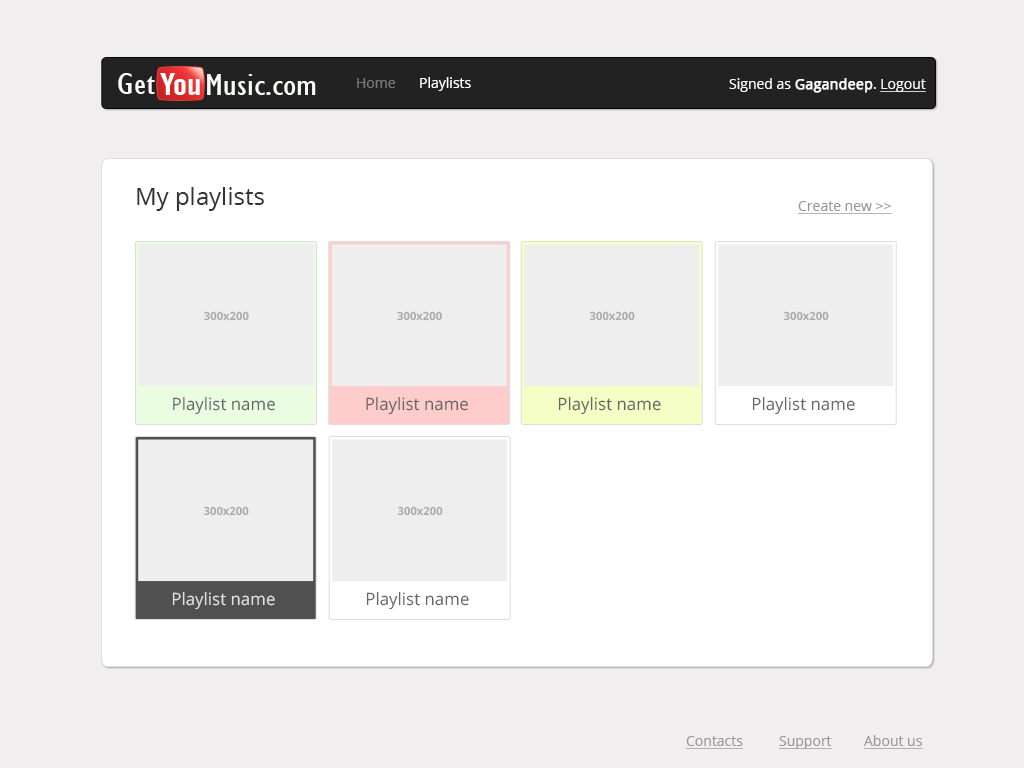
<style>
.page{position:relative;width:1024px;height:768px;background:#f0eeee}
.page>*{position:absolute;margin:0}
.t1{font:31px "GillSansMT-Condensed";color:#fafdfa;scale:1.27 1}
.t2{font:31px "AlternateGothicNo2BT-Regular";color:#fffefe;scale:1.27 1}
.t3{font:14px "OpenSans";color:#777777}
.t4{font:14px "OpenSans";color:#ffffff}
.t5{font:14px "OpenSans";color:#fbf9f9}
.t6{font:14px "OpenSans";color:#fbf9f9;font-weight:bold}
.t7{font:14px "OpenSans";color:#fbf9f9;text-decoration:underline}
.t8{font:24px "OpenSans";color:#333333}
.t9{font:14px "OpenSans";color:#979797;text-decoration:underline}
.t10{font:11.3px "OpenSans-Bold";color:#ababab}
.t11{font:17px "OpenSans";color:#666666}
.t12{font:17px "OpenSans";color:#e1dfdf}
.t13{font:14px "OpenSans";color:#999999;text-decoration:underline}
</style>
<div class="page">
<p class="t1" style="left:118px;top:73px;width:37px;height:21px">Get</p>
<p class="t2" style="left:160px;top:73px;width:40px;height:22px">You</p>
<p class="t1" style="left:207px;top:74px;width:58px;height:21px">Music</p>
<p class="t3" style="left:357px;top:78px;width:38px;height:10px">Home</p>
<p class="t4" style="left:420px;top:77px;width:51px;height:14px">Playlists</p>
<p class="t5" style="left:729px;top:78px;width:197px;height:15px">Signed as <span class="t6">Gagandeep</span>. <span class="t7">Logout</span></p>
<p class="t1" style="left:266px;top:81px;width:50px;height:14px">.com</p>
<p class="t8" style="left:137px;top:187px;width:127px;height:24px">My playlists</p>
<p class="t9" style="left:798px;top:201px;width:94px;height:13px">Create new &gt;&gt;</p>
<p class="t10" style="left:204px;top:311px;width:45px;height:10px">300x200</p>
<p class="t10" style="left:397px;top:311px;width:45px;height:10px">300x200</p>
<p class="t10" style="left:590px;top:311px;width:45px;height:10px">300x200</p>
<p class="t10" style="left:784px;top:311px;width:45px;height:10px">300x200</p>
<p class="t11" style="left:173px;top:397px;width:102px;height:18px">Playlist name</p>
<p class="t11" style="left:366px;top:397px;width:102px;height:18px">Playlist name</p>
<p class="t11" style="left:558px;top:396px;width:103px;height:19px">Playlist name</p>
<p class="t11" style="left:752px;top:396px;width:103px;height:19px">Playlist name</p>
<p class="t10" style="left:204px;top:506px;width:45px;height:10px">300x200</p>
<p class="t10" style="left:398px;top:506px;width:45px;height:10px">300x200</p>
<p class="t12" style="left:172px;top:591px;width:103px;height:19px">Playlist name</p>
<p class="t11" style="left:366px;top:591px;width:103px;height:19px">Playlist name</p>
<p class="t13" style="left:686px;top:736px;width:57px;height:13px">Contacts</p>
<p class="t13" style="left:779px;top:736px;width:53px;height:13px">Support</p>
<p class="t13" style="left:864px;top:735px;width:59px;height:14px">About us</p>
</div>
